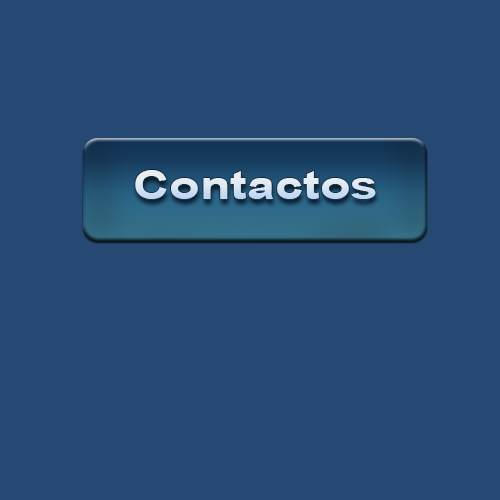
<style>
.page{position:relative;width:500px;height:500px;background:#254972}
.page>*{position:absolute;margin:0}
.t1{font:39.7px "Arial-BoldMT";color:#e8edf2;scale:1.26 1}
</style>
<div class="page">
<p class="t1" style="left:135px;top:170px;width:241px;height:29px">Contactos</p>
</div>
